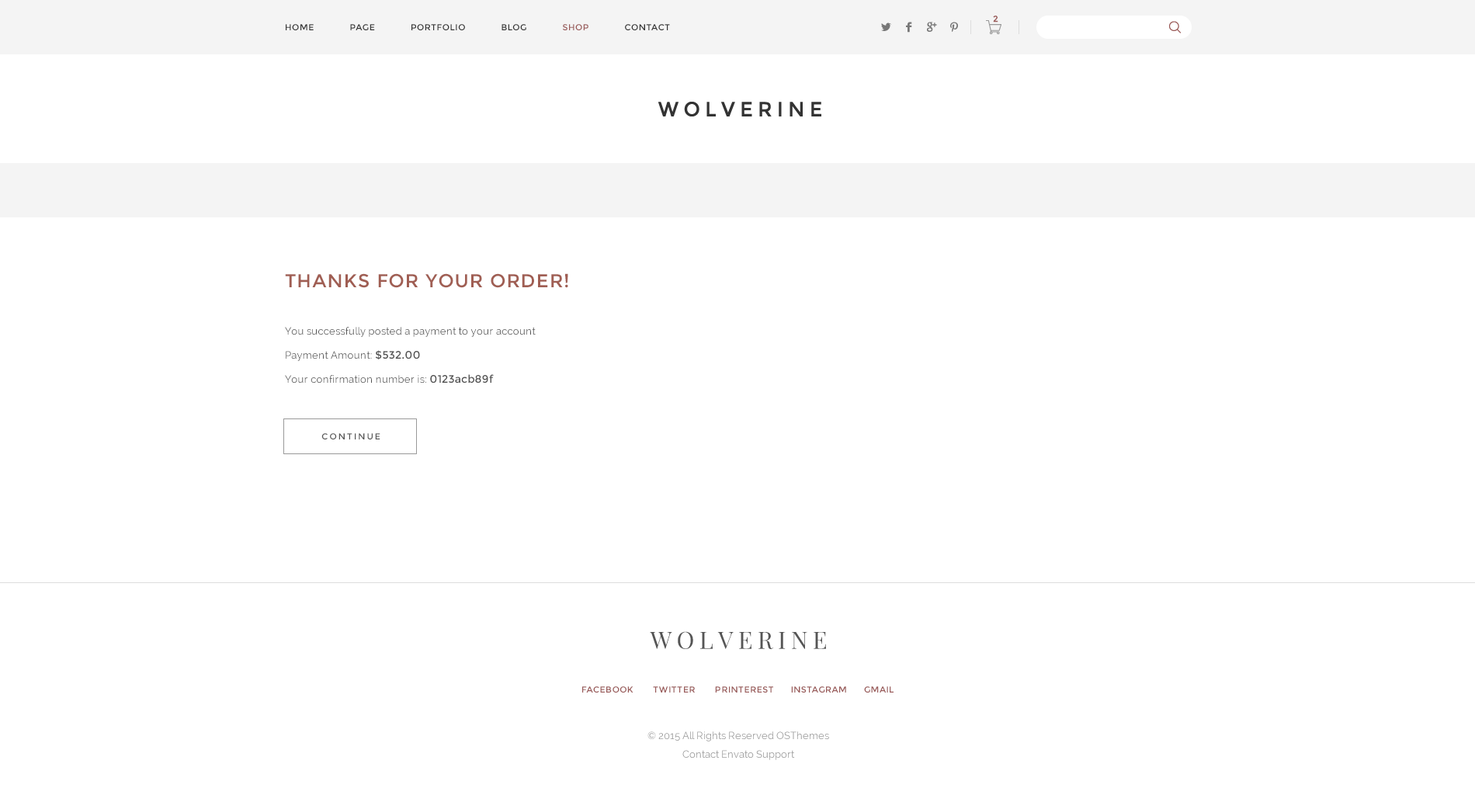
<style>
.page{position:relative;width:1475px;height:809px;background:#ffffff}
.page>*{position:absolute;margin:0}
.t1{font:8.5px "Montserrat-Regular";color:#9a5a58;font-weight:bold}
.t2{font:8.5px "Montserrat-Regular";letter-spacing:0.05em;color:#333333}
.t3{font:8.5px "Montserrat-Regular";letter-spacing:0.05em;color:#995958}
.t4{font:18.6px "Montserrat-Regular";letter-spacing:0.05em;color:#a05e53}
.t5{font:10.1px/22.2px "Raleway";letter-spacing:0.02em;color:#545454}
.t6{font:10.9px/23.9px "Montserrat-Regular";letter-spacing:0.02em;color:#545454}
.t7{font:8.5px "Montserrat-Regular";letter-spacing:0.2em;color:#555555}
.t8{font:24px "PlayfairDisplay-Regular";letter-spacing:0.1em;color:#555555}
.t9{font:10.1px/18.2px "Raleway";color:#999999}
</style>
<div class="page">
<p class="t1" style="left:993px;top:16px;width:5px;height:7px">2</p>
<p class="t2" style="left:286px;top:24px;width:384px;height:6px">HOME      PAGE      PORTFOLIO      BLOG      <span class="t3">SHOP </span>     CONTACT</p>
<p class="t4" style="left:285px;top:273px;width:283px;height:15px">THANKS FOR YOUR ORDER!</p>
<p class="t5" style="left:285px;top:327px;width:250px;height:56px">You successfully posted a payment to your account<br>Payment Amount: <span class="t6">$532.00<br></span>Your confirmation number is: <span class="t6">0123acb89f</span></p>
<p class="t7" style="left:321px;top:433px;width:59px;height:6px">CONTINUE</p>
<p class="t8" style="left:650px;top:631px;width:176px;height:18px">WOLVERINE</p>
<p class="t3" style="left:582px;top:686px;width:311px;height:6px">FACEBOOK       TWITTER       PRINTEREST      INSTAGRAM      GMAIL</p>
<p class="t9" style="left:647px;top:731px;width:182px;height:29px;text-align:center">© 2015 All Rights Reserved OSThemes<br>Contact Envato Support</p>
</div>
